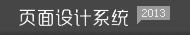
<style>
.page{position:relative;width:190px;height:35px;background:#464646}
.page>*{position:absolute;margin:0}
.t1{font:18px "RTWSYueGoTrial-Regular";color:#ffffff;font-weight:bold}
.t2{font:11px "Tahoma";color:#ffffff}
</style>
<div class="page">
<p class="t1" style="left:19px;top:9px;width:110px;height:17px">页面设计系统</p>
<p class="t2" style="left:142px;top:9px;width:23px;height:8px;opacity:0.79">2013</p>
</div>
